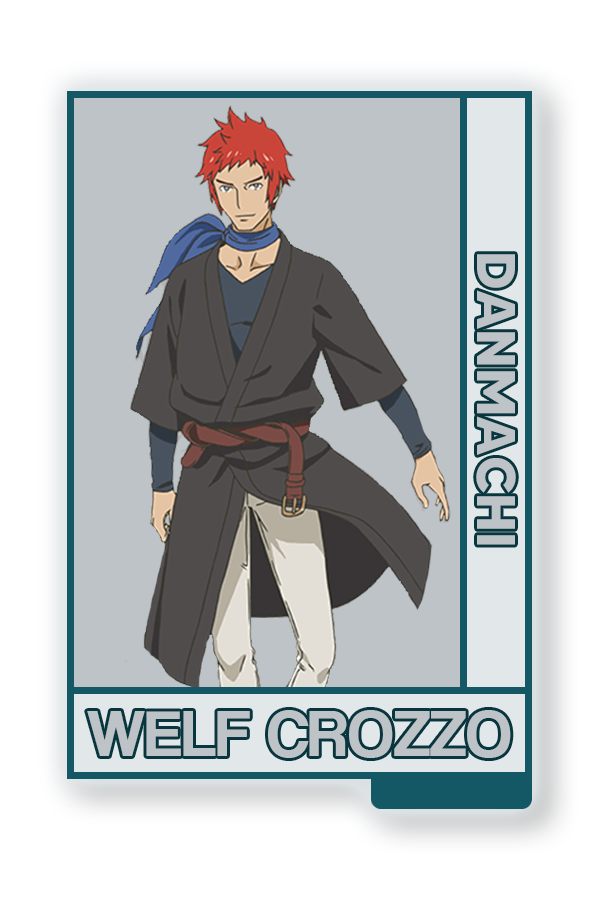
<style>
.page{position:relative;width:600px;height:900px;background:#bdc3c6}
.page>*{position:absolute;margin:0}
.t1{font:54.4px "MADETOMMY-Bold";color:#bdc3c6}
.t2{font:68.2px "CoolveticaRg-Regular";color:#bdc3c6}
</style>
<div class="page">
<p class="t1" style="left:476px;top:254px;width:40px;height:291px;rotate:90deg">DANMACHI</p>
<p class="t2" style="left:87px;top:710px;width:424px;height:48px">WELF CROZZO</p>
</div>
